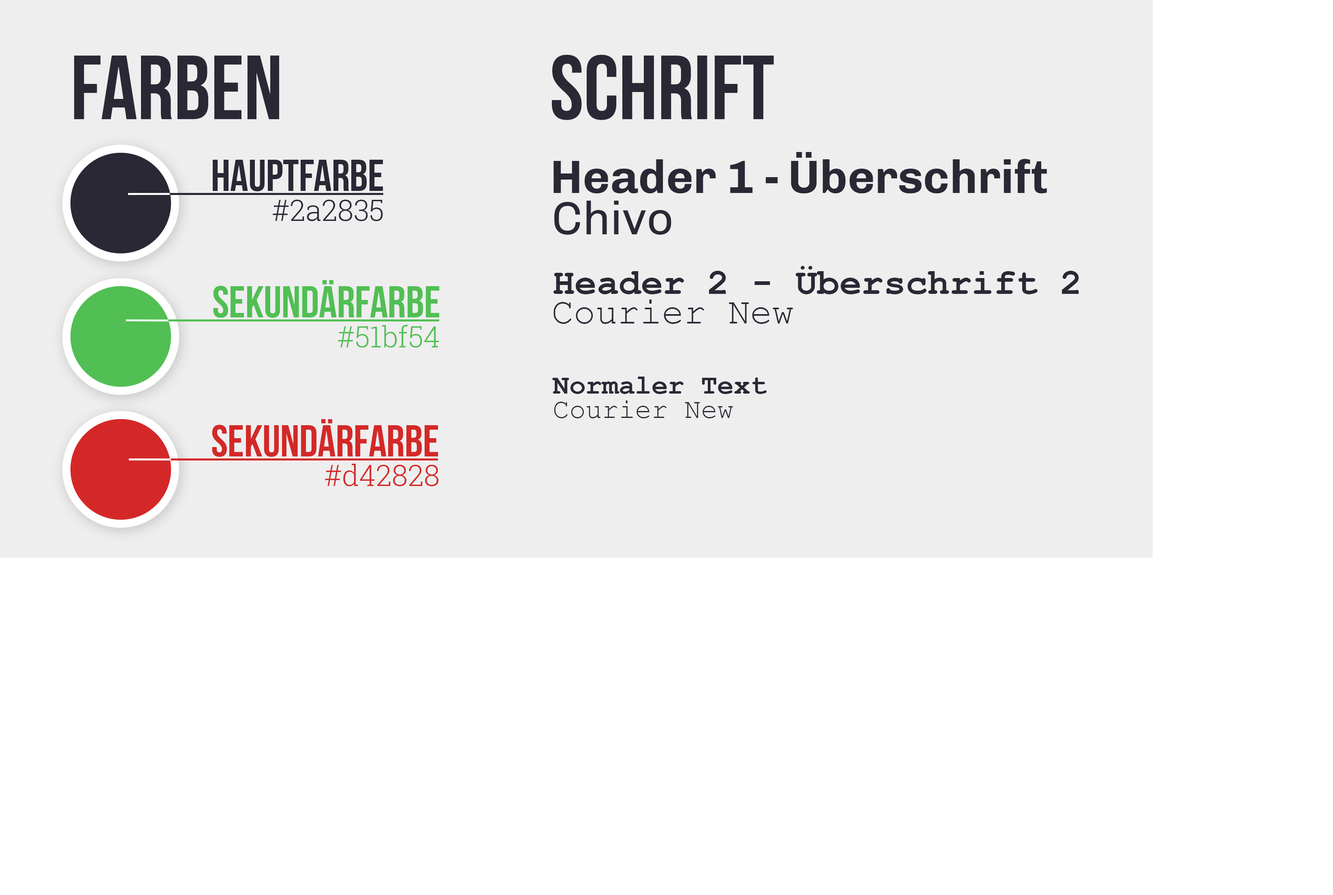
<style>
.page{position:relative;width:1333px;height:895px;background:#ffffff}
.page>*{position:absolute;margin:0}
.t1{font:90.6px "BebasNeue";color:#2a2835}
.t2{font:44.7px "BebasNeue";color:#2a2835}
.t3{font:46.9px "Chivo-Bold";color:#2a2835}
.t4{font:29.2px "RobotoSlab-Light";color:#2a2835}
.t5{font:46.9px "Chivo-Regular";color:#2a2835}
.t6{font:36.8px "CourierNewPS-BoldMT";color:#2a2835}
.t7{font:44.7px "BebasNeue";color:#51bf54}
.t8{font:36.8px "CourierNewPSMT";color:#2a2835}
.t9{font:29.2px "RobotoSlab-Light";color:#51bf54}
.t10{font:27.4px "CourierNewPS-BoldMT";color:#2a2835}
.t11{font:27.4px "CourierNewPSMT";color:#2a2835}
.t12{font:44.7px "BebasNeue";color:#d42828}
.t13{font:29.2px "RobotoSlab-Light";color:#d42828}
</style>
<div class="page">
<p class="t1" style="left:74px;top:56px;width:205px;height:63px">FARBEN</p>
<p class="t1" style="left:552px;top:55px;width:222px;height:65px">Schrift</p>
<p class="t2" style="left:213px;top:160px;width:170px;height:31px">Hauptfarbe</p>
<p class="t3" style="left:553px;top:152px;width:494px;height:41px">Header 1 - Überschrift</p>
<p class="t4" style="left:273px;top:199px;width:110px;height:22px">#2a2835</p>
<p class="t5" style="left:554px;top:201px;width:117px;height:34px">Chivo</p>
<p class="t6" style="left:553px;top:266px;width:526px;height:28px">Header 2 - Überschrift 2</p>
<p class="t7" style="left:213px;top:280px;width:227px;height:38px">Sekundärfarbe</p>
<p class="t8" style="left:553px;top:299px;width:240px;height:25px">Courier New</p>
<p class="t9" style="left:338px;top:325px;width:101px;height:23px">#51bf54</p>
<p class="t10" style="left:552px;top:376px;width:215px;height:18px">Normaler Text</p>
<p class="t11" style="left:554px;top:400px;width:179px;height:18px">Courier New</p>
<p class="t12" style="left:212px;top:419px;width:226px;height:38px">Sekundärfarbe</p>
<p class="t13" style="left:325px;top:463px;width:114px;height:23px">#d42828</p>
</div>
